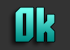
<style>
.page{position:relative;width:70px;height:50px;background:#333333}
.page>*{position:absolute;margin:0}
.t1{font:47.9px "Whitestone-Bold"}
</style>
<div class="page">
<p class="t1" style="left:15px;top:7px;width:40px;height:35px">Ok</p>
</div>
